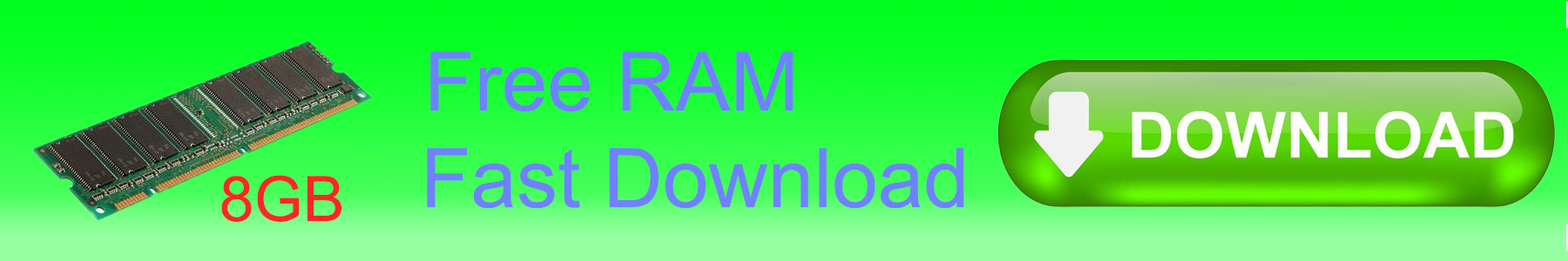
<style>
.page{position:relative;width:1568px;height:261px}
.page>*{position:absolute;margin:0}
.t1{font:82.3px "ArialMT";color:#7081ff}
.t2{font:62.7px "ArialMT";color:#fc2626}
</style>
<div class="page">
<p class="t1" style="left:430px;top:51px;width:363px;height:61px">Free RAM</p>
<p class="t1" style="left:427px;top:148px;width:537px;height:61px">Fast Download</p>
<p class="t2" style="left:221px;top:175px;width:120px;height:47px">8GB</p>
</div>
